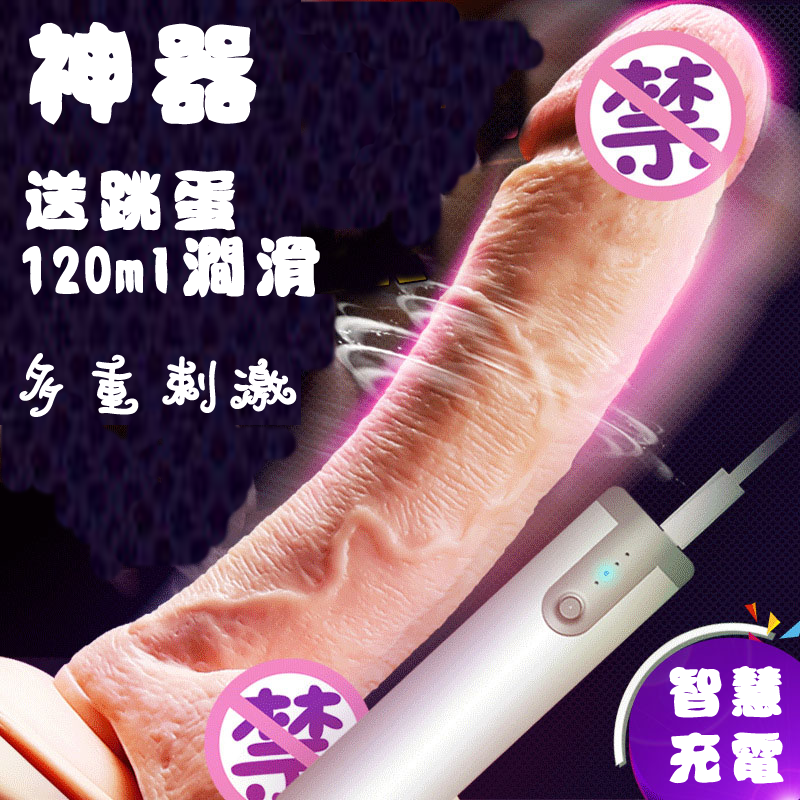
<style>
.page{position:relative;width:800px;height:800px}
.page>*{position:absolute;margin:0}
.t1{font:60px "id-kaiun";letter-spacing:-0.01em;color:#ffffff;font-weight:bold}
.t2{font:120px "id-kaiun";letter-spacing:-0.01em;color:#ffffff;font-weight:bold}
.t3{font:72px "id-kaiun";letter-spacing:-0.01em;color:#ffffff;font-weight:bold}
.t4{font:72px "DFMo-W4-WINP-BF";letter-spacing:-0.01em;color:#ffffff;font-weight:bold}
</style>
<div class="page">
<p class="t1" style="left:22px;top:22px;width:298px;height:276px"><span class="t2">神器<br></span><span class="t3">送跳蛋<br></span>120ml<span class="t3">澗滑</span></p>
<p class="t4" style="left:19px;top:353px;width:278px;height:64px">多重剌激</p>
<p class="t1" style="left:669px;top:666px;width:115px;height:118px">智慧<br>充電</p>
</div>
